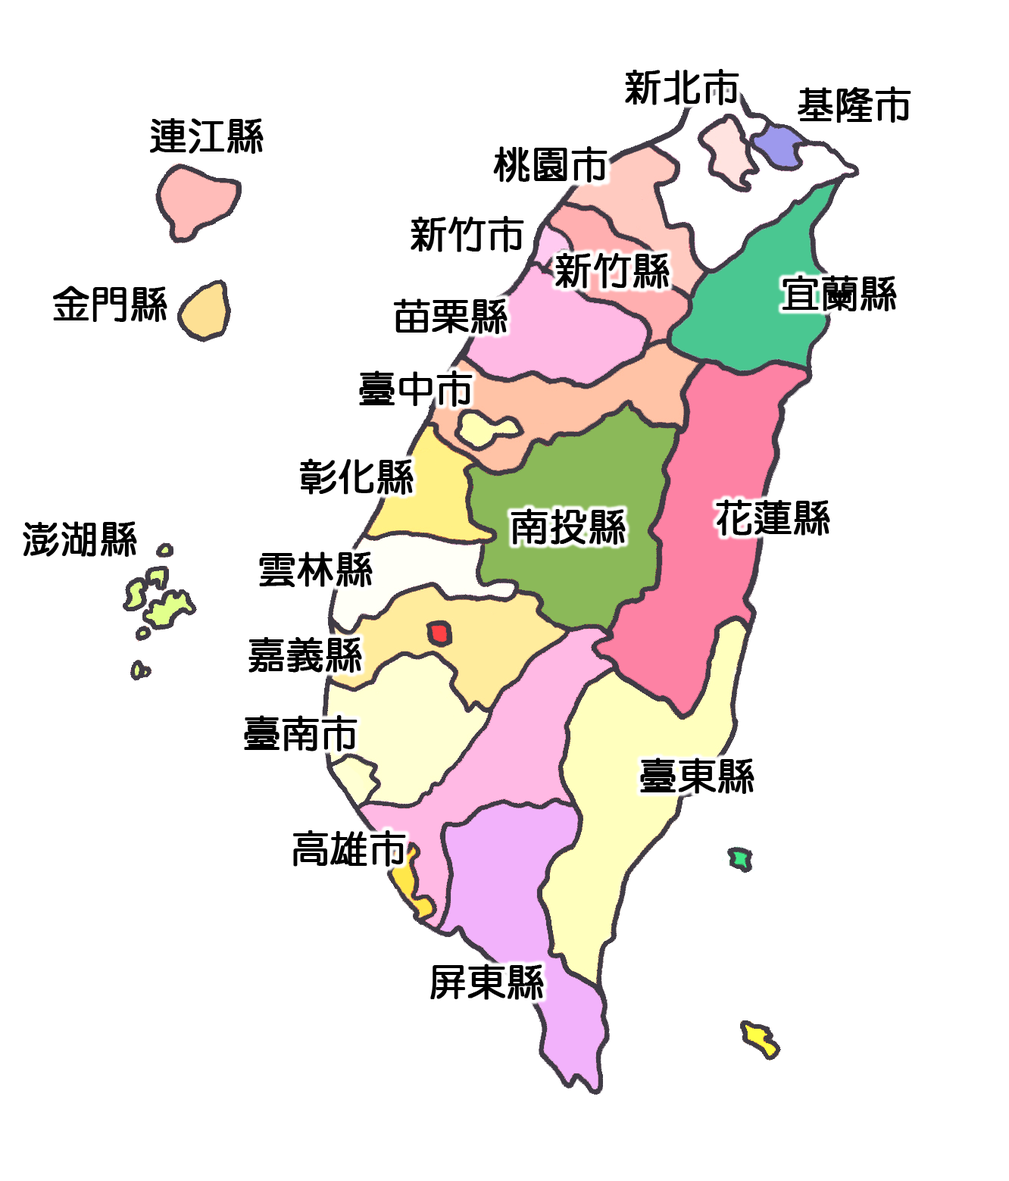
<style>
.page{position:relative;width:1009px;height:1181px;background:#ffffff}
.page>*{position:absolute;margin:0}
.t1{font:37.9px "DFYuan-W5-WIN-BF";color:#000000;font-weight:bold}
</style>
<div class="page">
<p class="t1" style="left:625px;top:69px;width:115px;height:36px">新北市</p>
<p class="t1" style="left:798px;top:86px;width:114px;height:37px">基隆市</p>
<p class="t1" style="left:150px;top:118px;width:114px;height:36px">連江縣</p>
<p class="t1" style="left:493px;top:146px;width:115px;height:37px">桃園市</p>
<p class="t1" style="left:411px;top:216px;width:113px;height:36px">新竹市</p>
<p class="t1" style="left:555px;top:253px;width:115px;height:36px">新竹縣</p>
<p class="t1" style="left:783px;top:275px;width:114px;height:36px">宜蘭縣</p>
<p class="t1" style="left:53px;top:286px;width:114px;height:36px">金門縣</p>
<p class="t1" style="left:393px;top:299px;width:115px;height:35px">苗栗縣</p>
<p class="t1" style="left:359px;top:371px;width:114px;height:36px">臺中市</p>
<p class="t1" style="left:299px;top:458px;width:115px;height:37px">彰化縣</p>
<p class="t1" style="left:511px;top:508px;width:115px;height:37px">南投縣</p>
<p class="t1" style="left:716px;top:499px;width:115px;height:37px">花蓮縣</p>
<p class="t1" style="left:23px;top:521px;width:114px;height:36px">澎湖縣</p>
<p class="t1" style="left:259px;top:552px;width:114px;height:35px">雲林縣</p>
<p class="t1" style="left:249px;top:637px;width:113px;height:36px">嘉義縣</p>
<p class="t1" style="left:244px;top:715px;width:114px;height:37px">臺南市</p>
<p class="t1" style="left:640px;top:758px;width:115px;height:36px">臺東縣</p>
<p class="t1" style="left:293px;top:831px;width:113px;height:36px">高雄市</p>
<p class="t1" style="left:430px;top:964px;width:114px;height:36px">屏東縣</p>
</div>
